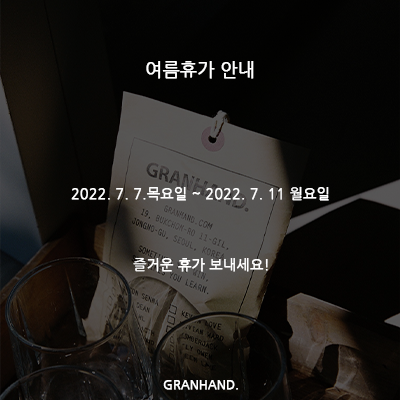
<style>
.page{position:relative;width:400px;height:400px}
.page>*{position:absolute;margin:0}
.t1{font:18px "NanumGothic";color:#ffffff;font-weight:bold}
.t2{font:14px "NanumGothic";color:#ffffff;font-weight:bold}
.t3{font:12px "NanumGothic";color:#ffffff;font-weight:bold}
</style>
<div class="page">
<p class="t1" style="left:146px;top:61px;width:108px;height:18px">여름휴가 안내</p>
<p class="t2" style="left:71px;top:186px;width:258px;height:15px">2022. 7. 7.목요일 ~ 2022. 7. 11 월요일</p>
<p class="t2" style="left:133px;top:257px;width:135px;height:15px">즐거운 휴가 보내세요!</p>
<p class="t3" style="left:163px;top:380px;width:75px;height:10px">GRANHAND.</p>
</div>
